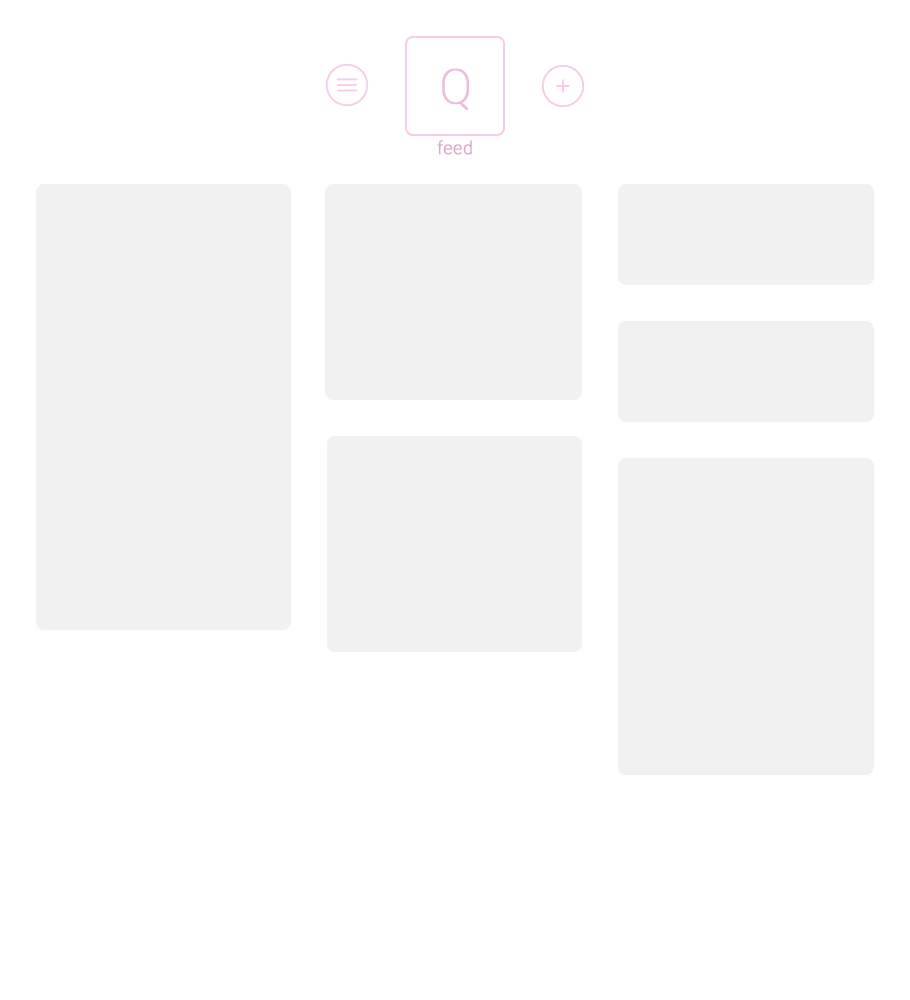
<style>
.page{position:relative;width:910px;height:1000px;background:#ffffff}
.page>*{position:absolute;margin:0}
.t1{font:48px "Roboto-Thin";color:#edbbdd;font-weight:bold}
.t2{font:18px "Roboto-Light";color:#dea6cc;font-weight:bold}
</style>
<div class="page">
<p class="t1" style="left:442px;top:68px;width:27px;height:42px">Q</p>
<p class="t2" style="left:437px;top:140px;width:35px;height:15px">feed</p>
</div>
